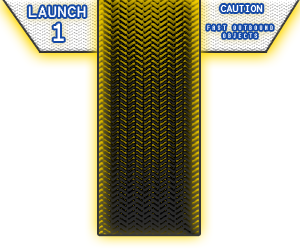
<style>
.page{position:relative;width:300px;height:250px;background:#ffffff}
.page>*{position:absolute;margin:0}
.t1{font:13px "Terminal";color:#ffffff}
.t2{font:20px "Terminal";color:#ffffff}
.t3{font:7px "Terminal";color:#ffffff}
.t4{font:8px "Terminal";color:#ffffff}
</style>
<div class="page">
<p class="t1" style="left:28px;top:6px;width:58px;height:35px;text-align:center">LAUNCH<br><span class="t2">1</span></p>
<p class="t3" style="left:207px;top:5px;width:66px;height:33px;text-align:center"><span class="t4">CAUTION<br><br></span>FAST OUTBOUND OBJECTS</p>
</div>
